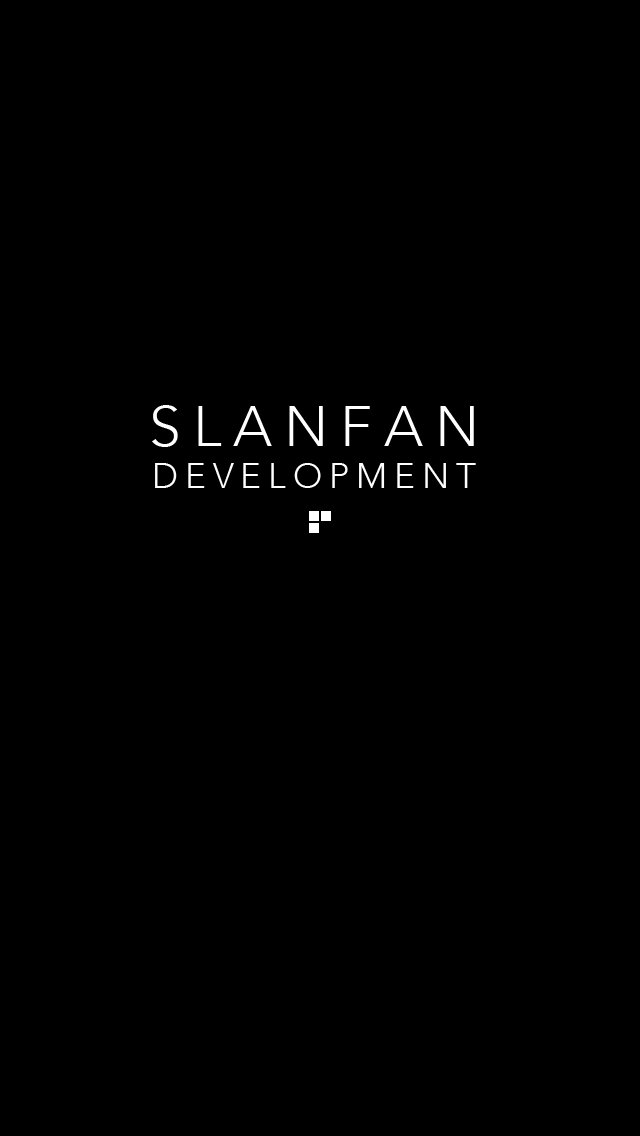
<style>
.page{position:relative;width:640px;height:1136px;background:#000000}
.page>*{position:absolute;margin:0}
.t1{font:35px "Avenir-Light";letter-spacing:0.2em;color:#ffffff}
.t2{font:57px "Avenir-Light";letter-spacing:0.21em;color:#ffffff}
</style>
<div class="page">
<p class="t1" style="left:152px;top:405px;width:324px;height:83px;text-align:center"><span class="t2">SLANFAN<br></span>DEVELOPMENT</p>
</div>
